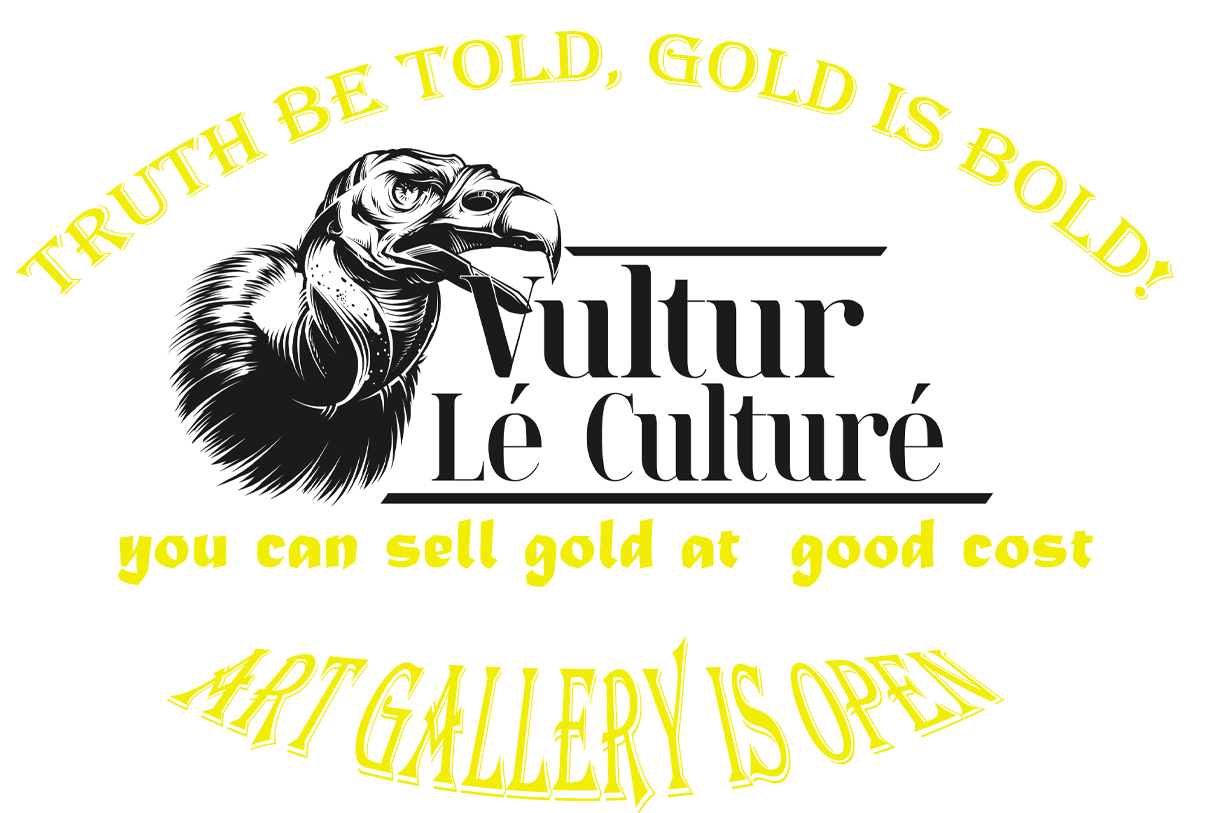
<style>
.page{position:relative;width:1207px;height:813px;background:#ffffff}
.page>*{position:absolute;margin:0}
.t1{font:75px "Algerian";color:#f1ee03}
.t2{font:75px "MaturaMTScriptCapitals";color:#f1ee03}
</style>
<div class="page">
<p class="t1" style="left:15px;top:31px;width:1160px;height:269px">Truth be told, gold is bold!</p>
<p class="t2" style="left:117px;top:518px;width:977px;height:69px">you can sell gold at  good cost</p>
<p class="t1" style="left:167px;top:636px;width:838px;height:178px">art gallery is open</p>
</div>
